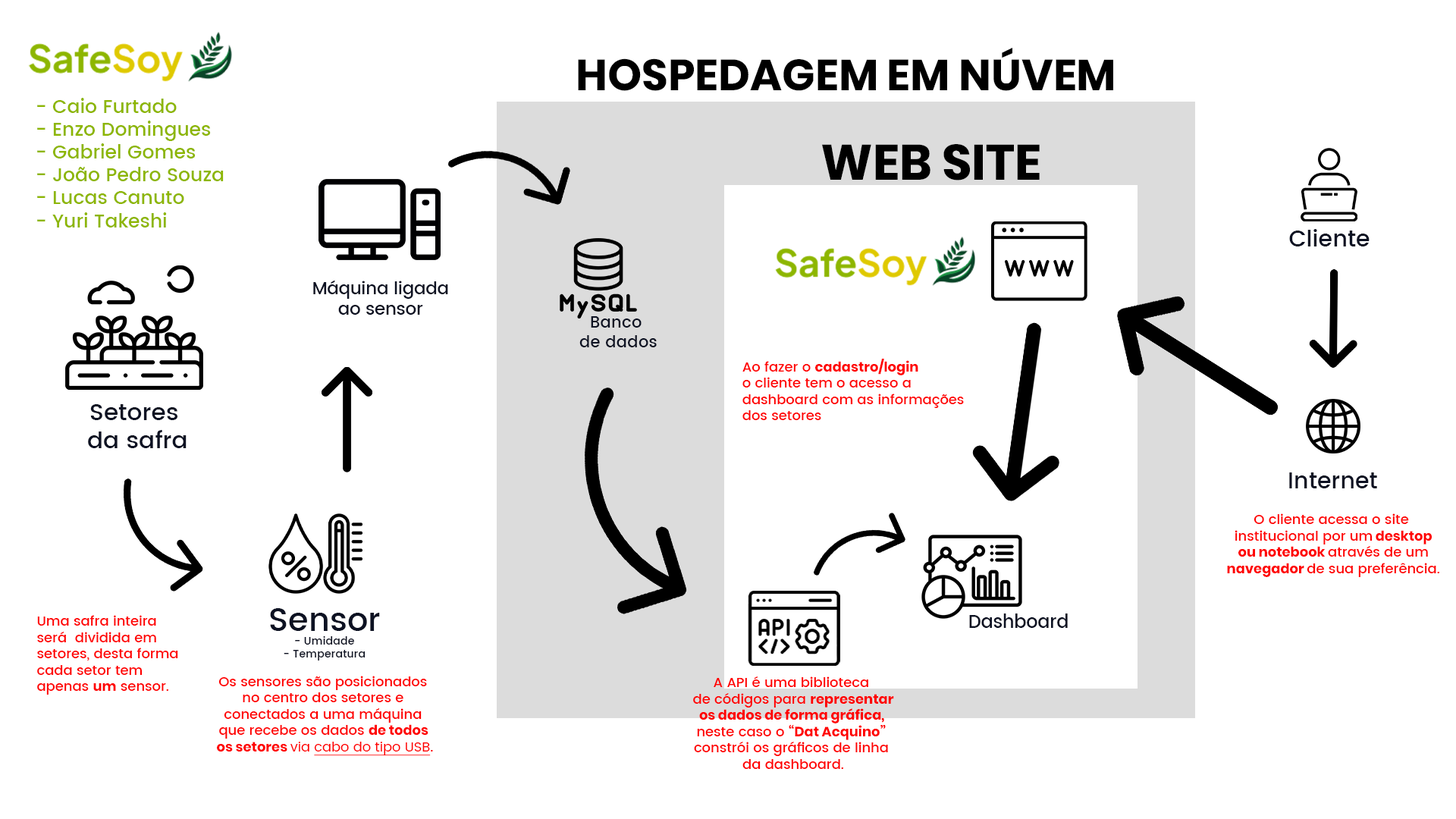
<style>
.page{position:relative;width:1456px;height:819px;background:#ffffff}
.page>*{position:absolute;margin:0}
.t1{font:43.5px "Poppins-Bold";color:#000000}
.t2{font:19px "Poppins-Medium";color:#8db600}
.t3{font:49.6px "Poppins-Bold";color:#000000}
.t4{font:23px "Poppins-Medium";color:#0d1223}
.t5{font:17.1px "Poppins-Medium";color:#0d1223}
.t6{font:16.3px "Poppins-Medium";color:#0d1223}
.t7{font:13.6px "Poppins-Medium";color:#ff0000}
.t8{font:13.6px "Poppins-Bold";color:#ff0000}
.t9{font:23.6px "Poppins-Medium";color:#0d1223}
.t10{font:10.9px "Poppins-Medium";color:#0d1223}
.t11{font:32.7px "Poppins-Medium";color:#0d1223}
.t12{font:17.9px "Poppins-Medium";color:#0d1223}
.t13{font:13.6px "Poppins-Regular";color:#ff0000}
.t14{font:13.6px "Poppins-Regular";color:#ff0000;text-decoration:underline}
</style>
<div class="page">
<p class="t1" style="left:578px;top:48px;width:535px;height:43px">HOSPEDAGEM EM NÚVEM</p>
<p class="t2" style="left:37px;top:98px;width:187px;height:129px">- Caio Furtado <br>- Enzo Domingues<br>- Gabriel Gomes<br>- João Pedro Souza<br>- Lucas Canuto<br>- Yuri Takeshi</p>
<p class="t3" style="left:822px;top:144px;width:218px;height:36px">WEB SITE</p>
<p class="t4" style="left:1289px;top:229px;width:81px;height:17px">Cliente</p>
<p class="t5" style="left:313px;top:280px;width:135px;height:35px;text-align:center">Máquina ligada<br>ao sensor</p>
<p class="t6" style="left:579px;top:316px;width:78px;height:31px;text-align:center">Banco <br>de dados</p>
<p class="t7" style="left:742px;top:359px;width:222px;height:61px">Ao fazer o <span class="t8">cadastro/login<br></span>o cliente tem o acesso a <br>dashboard com as informações <br>dos setores</p>
<p class="t9" style="left:88px;top:404px;width:99px;height:44px;text-align:center">Setores <br>da safra</p>
<p class="t4" style="left:1289px;top:472px;width:88px;height:16px">Internet</p>
<p class="t7" style="left:1227px;top:513px;width:213px;height:64px;text-align:center">O cliente acessa o site <br>institucional por um<span class="t8"> desktop<br>ou notebook </span>através de um<br><span class="t8">navegador </span>de sua preferência.</p>
<p class="t7" style="left:37px;top:615px;width:141px;height:80px">Uma safra inteira <br>será  dividida em <br>setores, desta forma<br>cada setor tem<br>apenas <span class="t8">um</span> sensor.</p>
<p class="t10" style="left:270px;top:608px;width:110px;height:52px;text-align:center"><span class="t11">Sensor<br></span>- Umidade<br>- Temperatura</p>
<p class="t12" style="left:969px;top:613px;width:99px;height:15px">Dashboard</p>
<p class="t7" style="left:217px;top:676px;width:216px;height:80px;text-align:center">Os sensores são posicionados <br>no centro dos setores e <br>conectados a uma máquina <br>que recebe os dados <span class="t8">de todos <br>os setores </span><span class="t13">via </span><span class="t14">cabo do tipo USB</span>.</p>
<p class="t7" style="left:693px;top:676px;width:201px;height:93px;text-align:center">A API é uma biblioteca <br>de códigos para <span class="t8">representar<br>os dados de forma gráfica, <br></span>neste caso o <span class="t8">“Dat Acquino”</span> <br>constrói os gráficos de linha <br>da dashboard.</p>
</div>
